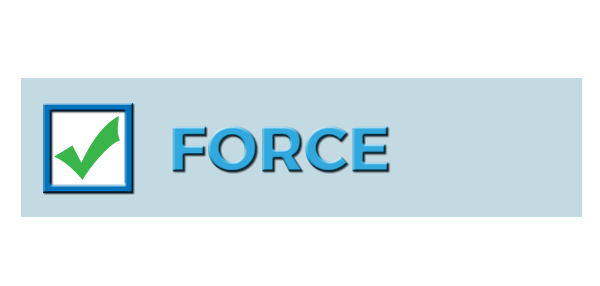
<style>
.page{position:relative;width:600px;height:286px;background:#ffffff}
.page>*{position:absolute;margin:0}
.t1{font:63.6px "Montserrat-Bold";color:#31a9de}
</style>
<div class="page">
<p class="t1" style="left:172px;top:126px;width:217px;height:46px">FORCE</p>
</div>
